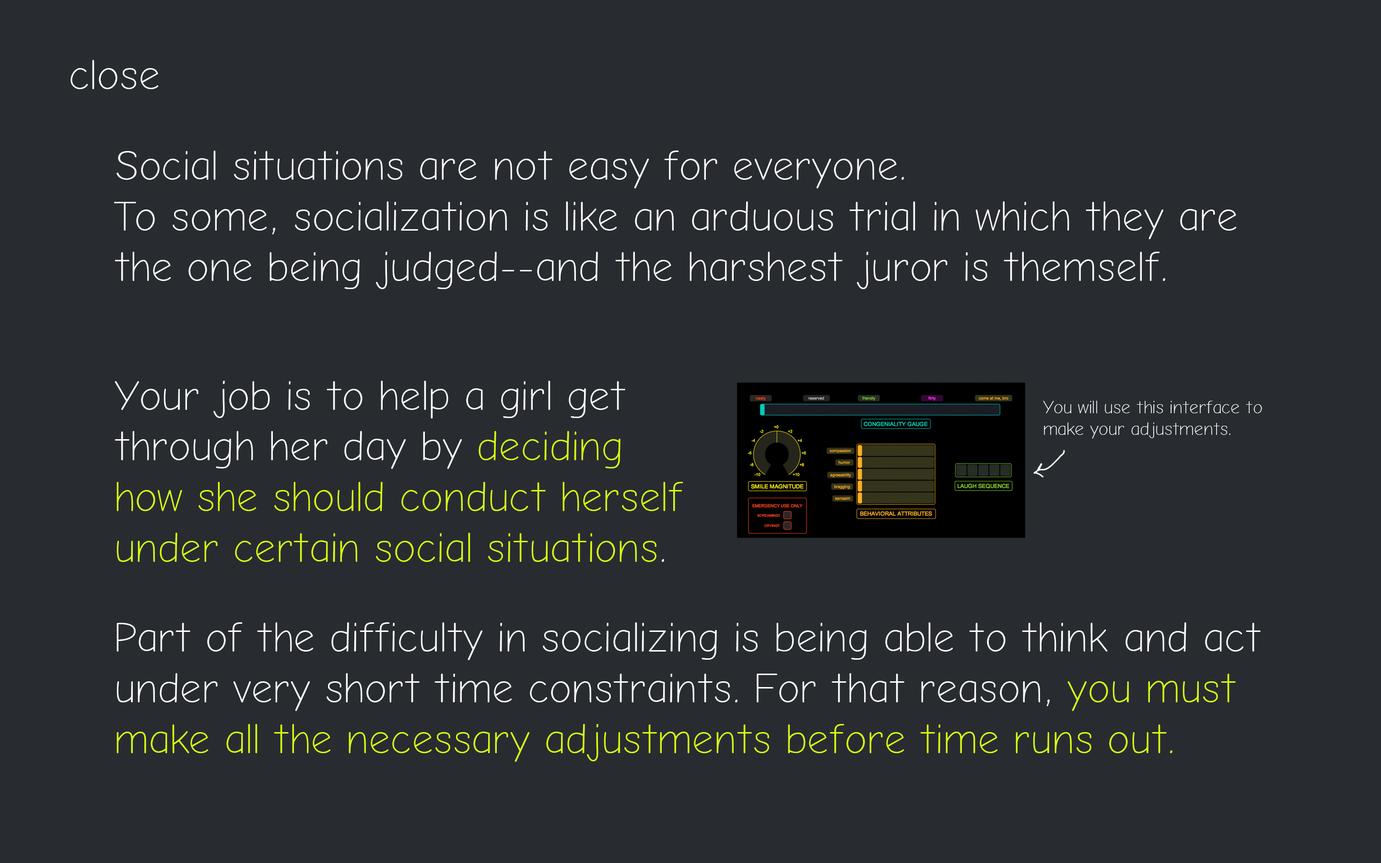
<style>
.page{position:relative;width:1381px;height:863px;background:#282c31}
.page>*{position:absolute;margin:0}
.t1{font:42.2px "ComicNeue-Light";color:#ffffff}
.t2{font:42.2px "ComicNeue-Light";color:#daff0f}
.t3{font:18px "ComicNeue-Light";color:#ffffff}
</style>
<div class="page">
<p class="t1" style="left:71px;top:60px;width:88px;height:29px">close</p>
<p class="t1" style="left:114px;top:151px;width:1123px;height:138px">Social situations are not easy for everyone. <br>To some, socialization is like an arduous trial in which they are the one being judged--and the harshest juror is themself.</p>
<p class="t2" style="left:115px;top:381px;width:568px;height:181px"><span class="t1">Your job is to help a girl get through her day by </span>deciding how she should conduct herself under certain social situations<span class="t1">.</span></p>
<p class="t3" style="left:1043px;top:400px;width:219px;height:39px">You will use this interface to make your adjustments.</p>
<p class="t1" style="left:117px;top:623px;width:1144px;height:139px">Part of the difficulty in socializing is being able to think and act under very short time constraints. For that reason, <span class="t2">you must make all the necessary adjustments before time runs out.</span></p>
</div>
